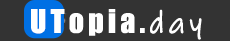
<style>
.page{position:relative;width:230px;height:41px;background:#333333}
.page>*{position:absolute;margin:0}
.t1{font:30px "Impact";letter-spacing:0.14em;color:#ffffff}
.t2{font:30px "InkFree";letter-spacing:0.14em;color:#ffffff;font-weight:bold}
</style>
<div class="page">
<p class="t1" style="left:31px;top:9px;width:171px;height:31px">UTopia.<span class="t2">day</span></p>
</div>
